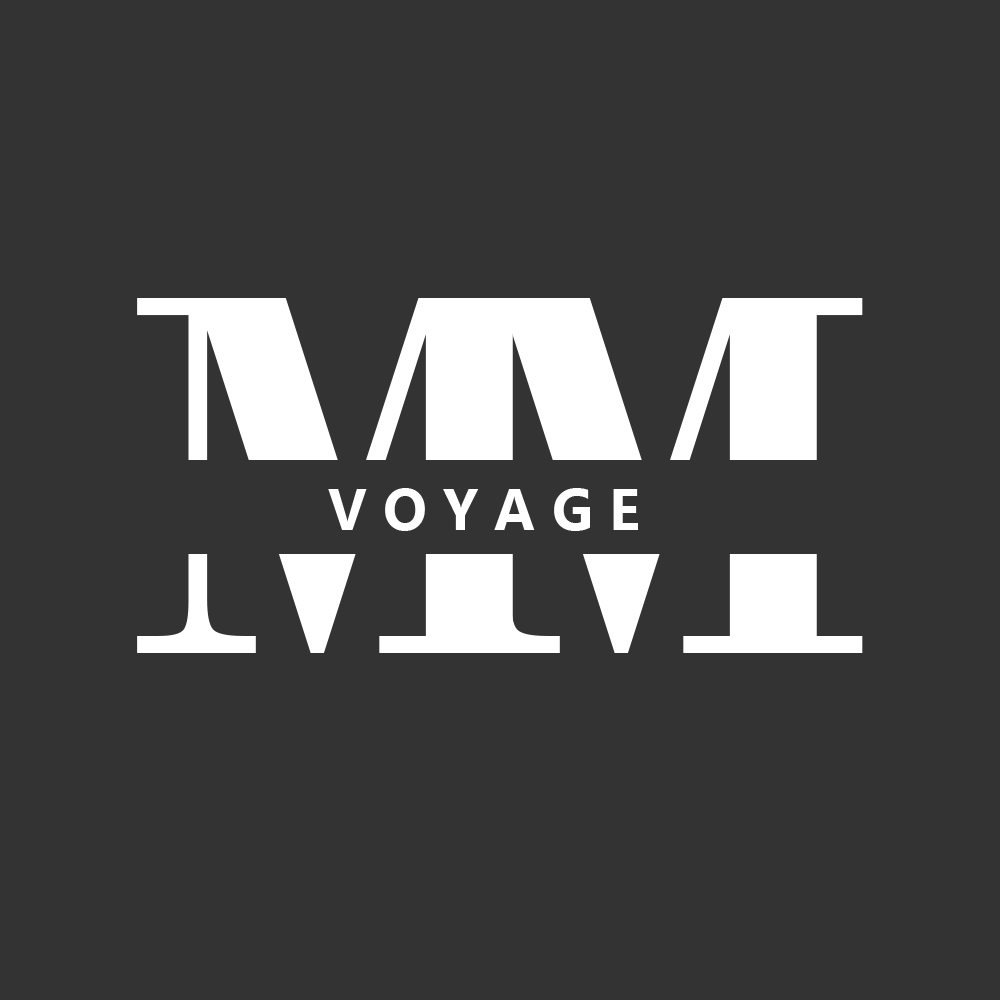
<style>
.page{position:relative;width:1000px;height:1000px;background:#333333}
.page>*{position:absolute;margin:0}
.t1{font:58.3px "MicrosoftTaiLe-Bold";color:#ffffff}
</style>
<div class="page">
<p class="t1" style="left:328px;top:488px;width:310px;height:43px">V O Y A G E</p>
</div>
